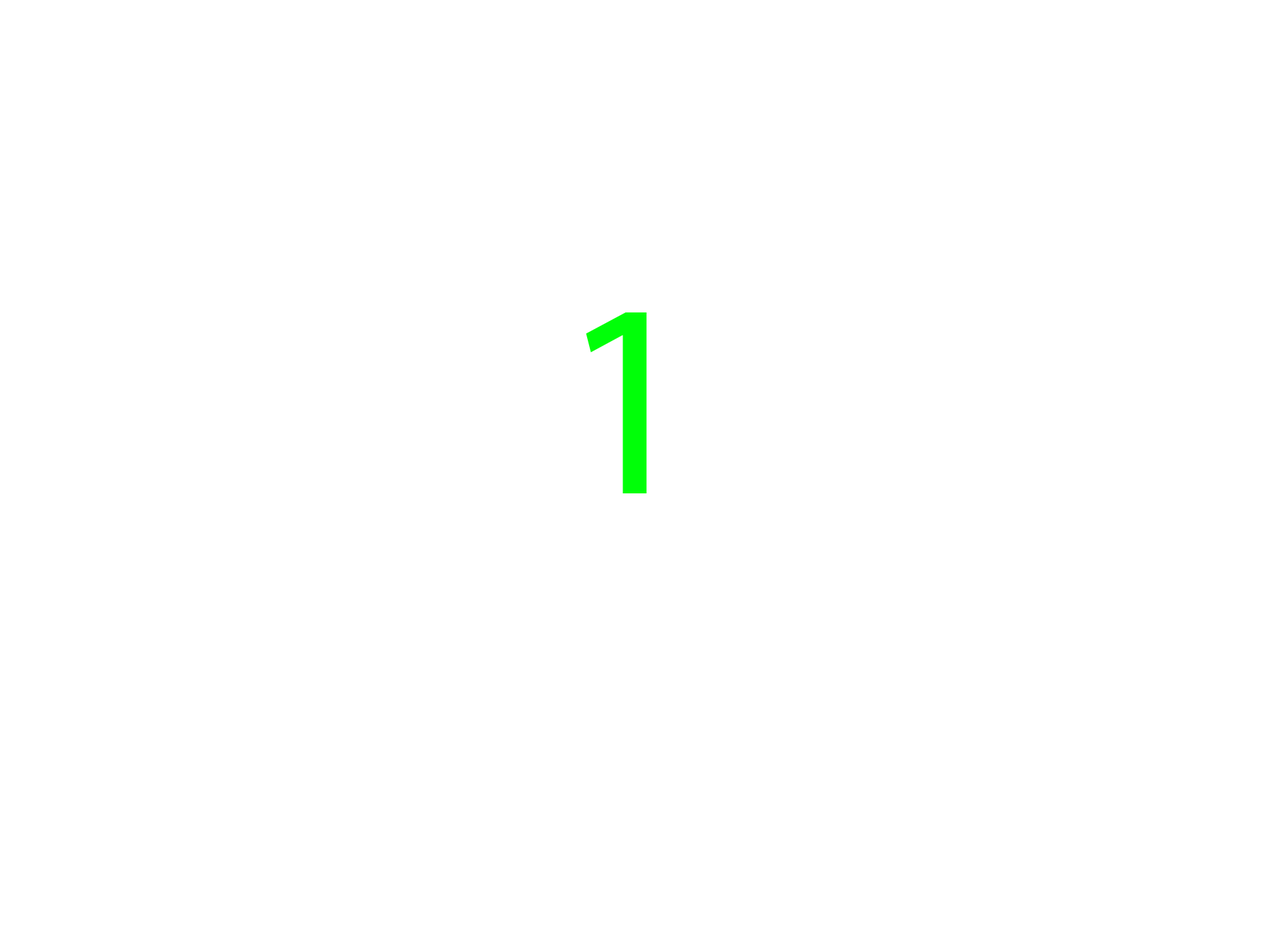
<style>
.page{position:relative;width:1261px;height:946px;background:#ffffff}
.page>*{position:absolute;margin:0}
.t1{font:278px "MyriadPro-Regular";color:#00ff08}
</style>
<div class="page">
<p class="t1" style="left:586px;top:312px;width:61px;height:181px">1</p>
</div>
